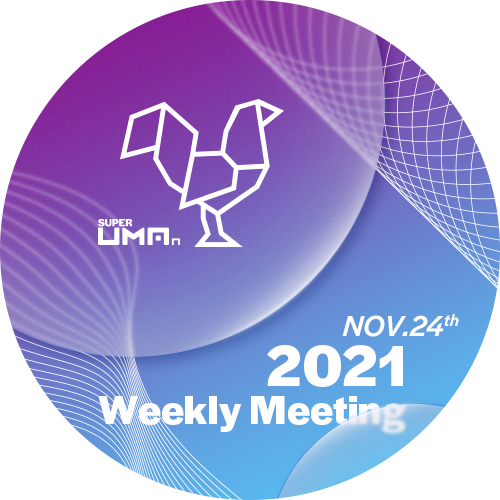
<style>
.page{position:relative;width:500px;height:500px;background:#ffffff}
.page>*{position:absolute;margin:0}
.t1{font:30.1px "HalyardDisplayMedium-Italic";color:#ffffff}
.t2{font:60.3px "HalyardDisplay-Bold";color:#ffffff}
.t3{font:42.4px "HalyardDisplay-Bold";color:#ffffff}
</style>
<div class="page">
<p class="t1" style="left:342px;top:314px;width:117px;height:23px">NOV.24th</p>
<p class="t2" style="left:267px;top:345px;width:136px;height:42px">2021</p>
<p class="t3" style="left:98px;top:396px;width:308px;height:37px">Weekly Meeting</p>
</div>
